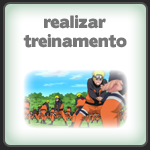
<style>
.page{position:relative;width:150px;height:150px}
.page>*{position:absolute;margin:0}
.t1{font:16px "BorisBlackBloxx";color:#777777}
</style>
<div class="page">
<p class="t1" style="left:23px;top:15px;width:104px;height:33px;text-align:center">realizar<br>treinamento</p>
</div>
